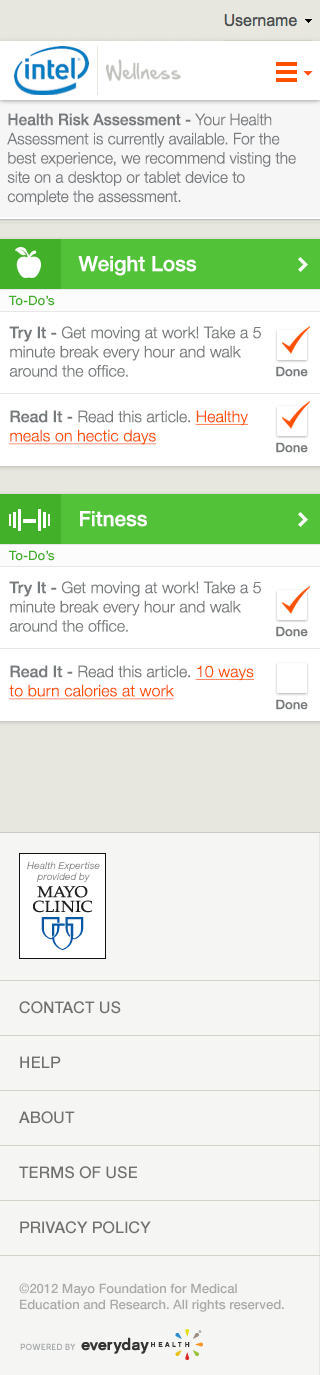
<style>
.page{position:relative;width:320px;height:1375px;background:#f5f5f3}
.page>*{position:absolute;margin:0}
.t1{font:16px "HelveticaNeue-Light";color:#787b7d;scale:0.97 1}
.t2{font:16px "HelveticaNeue-Medium";color:#787b7d;scale:0.97 1}
.t3{font:21px "HelveticaNeue-Medium";color:#ffffff}
.t4{font:13px "HelveticaNeue-Medium";color:#43b02a}
.t5{font:16px "HelveticaNeue-Light";color:#787b7d}
.t6{font:16px "HelveticaNeue-Medium";color:#787b7d}
.t7{font:13px "HelveticaNeue-Medium";color:#787b7d}
.t8{font:16px "HelveticaNeue-Light";letter-spacing:0.005em;color:#fe5000;text-decoration:underline}
.t9{font:10px/10.4px "HelveticaNeue-Italic";letter-spacing:-0.01em;color:#808083}
.t10{font:16px/55px "HelveticaNeue-Medium";color:#70706f;text-transform:uppercase}
.t11{font:13px "HelveticaNeue-Medium";color:#a9a9a9}
</style>
<div class="page">
<p class="t1" style="left:7px;top:113px;width:289px;height:92px"><span class="t2">Health Risk Assessment -</span> Your Health Assessment is currently available. For the best experience, we recommend visting the site on a desktop or tablet device to complete the assessment.</p>
<p class="t3" style="left:78px;top:256px;width:119px;height:20px">Weight Loss</p>
<p class="t4" style="left:9px;top:295px;width:46px;height:11px">To-Do’s</p>
<p class="t5" style="left:9px;top:326px;width:252px;height:51px"><span class="t6">Try It -</span> Get moving at work! Take a 5 minute break every hour and walk around the office.</p>
<p class="t7" style="left:276px;top:366px;width:32px;height:11px">Done</p>
<p class="t8" style="left:9px;top:410px;width:239px;height:35px"><span class="t6">Read It - </span><span class="t5">Read this article. </span>Healthy meals on hectic days</p>
<p class="t7" style="left:276px;top:442px;width:32px;height:11px">Done</p>
<p class="t3" style="left:80px;top:511px;width:67px;height:16px">Fitness</p>
<p class="t4" style="left:9px;top:550px;width:46px;height:11px">To-Do’s</p>
<p class="t5" style="left:9px;top:581px;width:252px;height:51px"><span class="t6">Try It -</span> Get moving at work! Take a 5 minute break every hour and walk around the office.</p>
<p class="t7" style="left:276px;top:626px;width:32px;height:11px">Done</p>
<p class="t8" style="left:9px;top:665px;width:245px;height:35px"><span class="t6">Read It - </span><span class="t5">Read this article. </span>10 ways to burn calories at work</p>
<p class="t7" style="left:276px;top:699px;width:32px;height:11px">Done</p>
<p class="t9" style="left:27px;top:861px;width:73px;height:21px;text-align:center">Health Expertise<br>provided by</p>
<p class="t10" style="left:19px;top:1001px;width:132px;height:233px">Contact us<br>Help<br>About<br>Terms Of Use<br>Privacy policy</p>
<p class="t11" style="left:19px;top:1283px;width:265px;height:29px">©2012 Mayo Foundation for Medical Education and Research. All rights reserved.</p>
</div>
